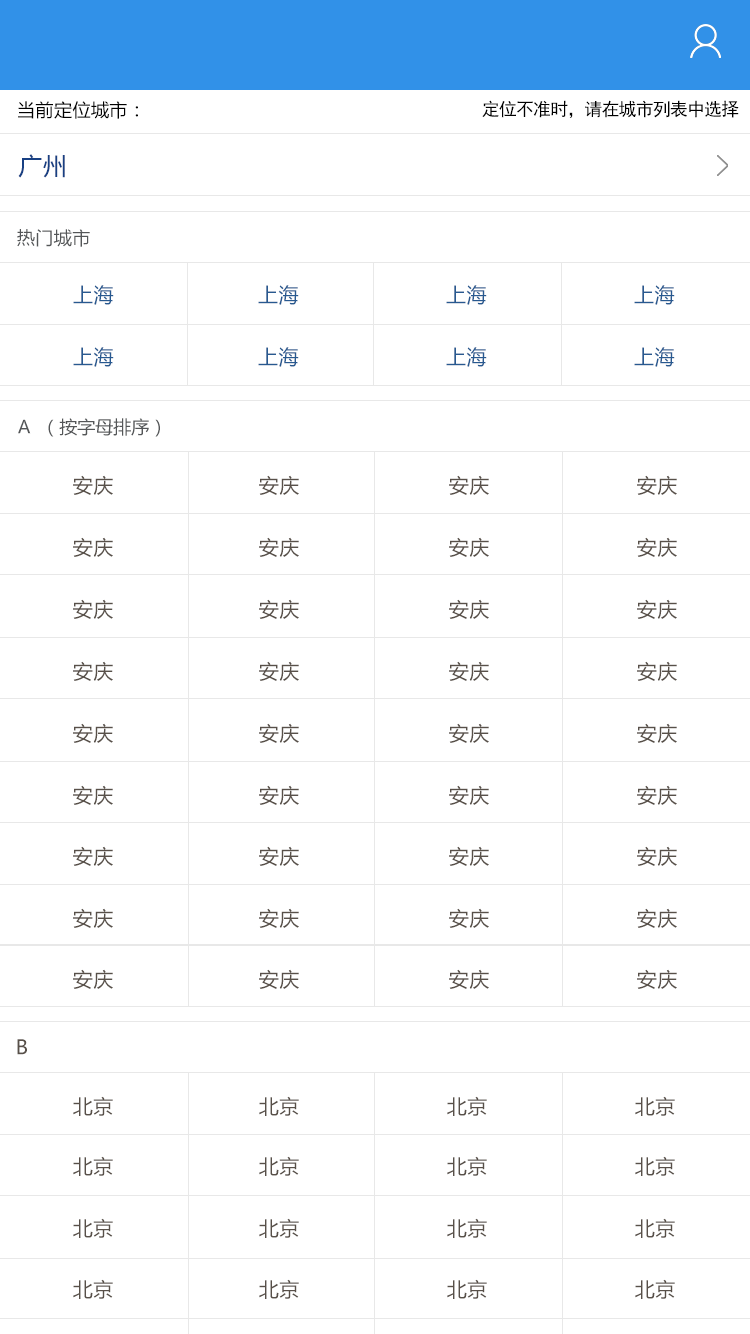
<style>
.page{position:relative;width:750px;height:1334px;background:#ffffff}
.page>*{position:absolute;margin:0}
.t1{font:18px "MicrosoftYaHei";letter-spacing:0.025em;color:#000000}
.t2{font:18px "SimHei";letter-spacing:-0.05em;color:#000000}
.t3{font:24px "MicrosoftYaHei";letter-spacing:0.025em;color:#184083}
.t4{font:18px "MicrosoftYaHei";letter-spacing:0.025em;color:#535658}
.t5{font:20px "MicrosoftYaHei";letter-spacing:0.025em;color:#285990}
.t6{font:18px "MicrosoftYaHei";color:#535658}
.t7{font:20px "MicrosoftYaHei";letter-spacing:0.025em;color:#585049}
</style>
<div class="page">
<p class="t1" style="left:18px;top:101px;width:120px;height:18px">当前定位城市：</p>
<p class="t2" style="left:482px;top:100px;width:257px;height:18px">定位不准时，请在城市列表中选择</p>
<p class="t3" style="left:18px;top:154px;width:47px;height:24px">广州</p>
<p class="t4" style="left:17px;top:229px;width:73px;height:18px">热门城市</p>
<p class="t5" style="left:73px;top:285px;width:41px;height:20px">上海</p>
<p class="t5" style="left:258px;top:285px;width:41px;height:20px">上海</p>
<p class="t5" style="left:446px;top:285px;width:41px;height:20px">上海</p>
<p class="t5" style="left:634px;top:285px;width:41px;height:20px">上海</p>
<p class="t5" style="left:73px;top:347px;width:41px;height:20px">上海</p>
<p class="t5" style="left:258px;top:347px;width:41px;height:20px">上海</p>
<p class="t5" style="left:446px;top:347px;width:41px;height:20px">上海</p>
<p class="t5" style="left:634px;top:347px;width:41px;height:20px">上海</p>
<p class="t6" style="left:18px;top:418px;width:142px;height:19px">A  （按字母排序）</p>
<p class="t7" style="left:73px;top:475px;width:40px;height:20px">安庆</p>
<p class="t7" style="left:259px;top:475px;width:40px;height:20px">安庆</p>
<p class="t7" style="left:449px;top:475px;width:40px;height:20px">安庆</p>
<p class="t7" style="left:637px;top:475px;width:40px;height:20px">安庆</p>
<p class="t7" style="left:73px;top:537px;width:40px;height:20px">安庆</p>
<p class="t7" style="left:259px;top:537px;width:40px;height:20px">安庆</p>
<p class="t7" style="left:449px;top:537px;width:40px;height:20px">安庆</p>
<p class="t7" style="left:637px;top:537px;width:40px;height:20px">安庆</p>
<p class="t7" style="left:73px;top:599px;width:40px;height:20px">安庆</p>
<p class="t7" style="left:259px;top:599px;width:40px;height:20px">安庆</p>
<p class="t7" style="left:449px;top:599px;width:40px;height:20px">安庆</p>
<p class="t7" style="left:637px;top:599px;width:40px;height:20px">安庆</p>
<p class="t7" style="left:73px;top:661px;width:40px;height:20px">安庆</p>
<p class="t7" style="left:259px;top:661px;width:40px;height:20px">安庆</p>
<p class="t7" style="left:449px;top:661px;width:40px;height:20px">安庆</p>
<p class="t7" style="left:637px;top:661px;width:40px;height:20px">安庆</p>
<p class="t7" style="left:73px;top:723px;width:40px;height:20px">安庆</p>
<p class="t7" style="left:259px;top:723px;width:40px;height:20px">安庆</p>
<p class="t7" style="left:449px;top:723px;width:40px;height:20px">安庆</p>
<p class="t7" style="left:637px;top:723px;width:40px;height:20px">安庆</p>
<p class="t7" style="left:73px;top:785px;width:40px;height:20px">安庆</p>
<p class="t7" style="left:259px;top:785px;width:40px;height:20px">安庆</p>
<p class="t7" style="left:449px;top:785px;width:40px;height:20px">安庆</p>
<p class="t7" style="left:637px;top:785px;width:40px;height:20px">安庆</p>
<p class="t7" style="left:73px;top:846px;width:40px;height:20px">安庆</p>
<p class="t7" style="left:259px;top:846px;width:40px;height:20px">安庆</p>
<p class="t7" style="left:449px;top:846px;width:40px;height:20px">安庆</p>
<p class="t7" style="left:637px;top:846px;width:40px;height:20px">安庆</p>
<p class="t7" style="left:73px;top:908px;width:40px;height:20px">安庆</p>
<p class="t7" style="left:259px;top:908px;width:40px;height:20px">安庆</p>
<p class="t7" style="left:449px;top:908px;width:40px;height:20px">安庆</p>
<p class="t7" style="left:637px;top:908px;width:40px;height:20px">安庆</p>
<p class="t7" style="left:73px;top:969px;width:40px;height:20px">安庆</p>
<p class="t7" style="left:259px;top:969px;width:40px;height:20px">安庆</p>
<p class="t7" style="left:449px;top:969px;width:40px;height:20px">安庆</p>
<p class="t7" style="left:637px;top:969px;width:40px;height:20px">安庆</p>
<p class="t7" style="left:17px;top:1039px;width:10px;height:16px">B</p>
<p class="t7" style="left:73px;top:1096px;width:40px;height:20px">北京</p>
<p class="t7" style="left:259px;top:1096px;width:40px;height:20px">北京</p>
<p class="t7" style="left:447px;top:1096px;width:40px;height:20px">北京</p>
<p class="t7" style="left:635px;top:1096px;width:40px;height:20px">北京</p>
<p class="t7" style="left:73px;top:1156px;width:40px;height:20px">北京</p>
<p class="t7" style="left:259px;top:1156px;width:40px;height:20px">北京</p>
<p class="t7" style="left:447px;top:1156px;width:40px;height:20px">北京</p>
<p class="t7" style="left:635px;top:1156px;width:40px;height:20px">北京</p>
<p class="t7" style="left:73px;top:1218px;width:40px;height:20px">北京</p>
<p class="t7" style="left:259px;top:1218px;width:40px;height:20px">北京</p>
<p class="t7" style="left:447px;top:1218px;width:40px;height:20px">北京</p>
<p class="t7" style="left:635px;top:1218px;width:40px;height:20px">北京</p>
<p class="t7" style="left:73px;top:1279px;width:40px;height:20px">北京</p>
<p class="t7" style="left:259px;top:1279px;width:40px;height:20px">北京</p>
<p class="t7" style="left:447px;top:1279px;width:40px;height:20px">北京</p>
<p class="t7" style="left:635px;top:1279px;width:40px;height:20px">北京</p>
</div>
